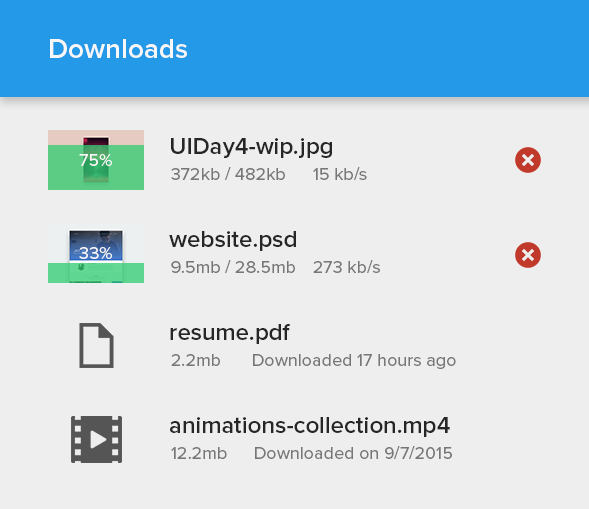
<style>
.page{position:relative;width:589px;height:509px;background:#eeeeee}
.page>*{position:absolute;margin:0}
.t1{font:28px "ProximaNova-Semibold";color:#f7f7f7}
.t2{font:24px "ProximaNova-Semibold";color:#262626}
.t3{font:18px "ProximaNova-Regular";color:#f7f7f7}
.t4{font:18px "ProximaNova-Regular";color:#777777}
</style>
<div class="page">
<p class="t1" style="left:50px;top:39px;width:137px;height:19px">Downloads</p>
<p class="t2" style="left:171px;top:138px;width:161px;height:20px">UIDay4-wip.jpg</p>
<p class="t3" style="left:79px;top:154px;width:33px;height:12px">75%</p>
<p class="t4" style="left:171px;top:167px;width:114px;height:13px">372kb / 482kb</p>
<p class="t4" style="left:313px;top:167px;width:54px;height:13px">15 kb/s</p>
<p class="t2" style="left:169px;top:231px;width:127px;height:20px">website.psd</p>
<p class="t3" style="left:79px;top:247px;width:33px;height:12px">33%</p>
<p class="t4" style="left:171px;top:260px;width:124px;height:13px">9.5mb / 28.5mb</p>
<p class="t4" style="left:313px;top:260px;width:67px;height:13px">273 kb/s</p>
<p class="t2" style="left:170px;top:324px;width:121px;height:20px">resume.pdf</p>
<p class="t4" style="left:171px;top:354px;width:49px;height:12px">2.2mb</p>
<p class="t4" style="left:253px;top:354px;width:203px;height:15px">Downloaded 17 hours ago</p>
<p class="t2" style="left:170px;top:417px;width:280px;height:20px">animations-collection.mp4</p>
<p class="t4" style="left:171px;top:447px;width:56px;height:12px">12.2mb</p>
<p class="t4" style="left:255px;top:446px;width:197px;height:13px">Downloaded on 9/7/2015</p>
</div>
